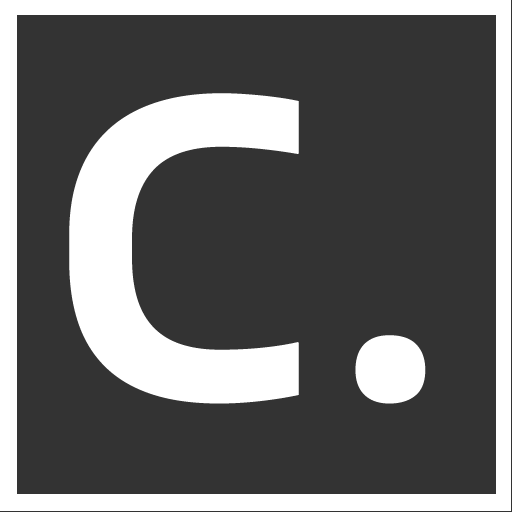
<style>
.page{position:relative;width:512px;height:512px;background:#333333}
.page>*{position:absolute;margin:0}
.t1{font:399.8px "WascoSans-Bold";color:#ffffff;font-weight:bold}
</style>
<div class="page">
<p class="t1" style="left:69px;top:93px;width:357px;height:311px">C.</p>
</div>
